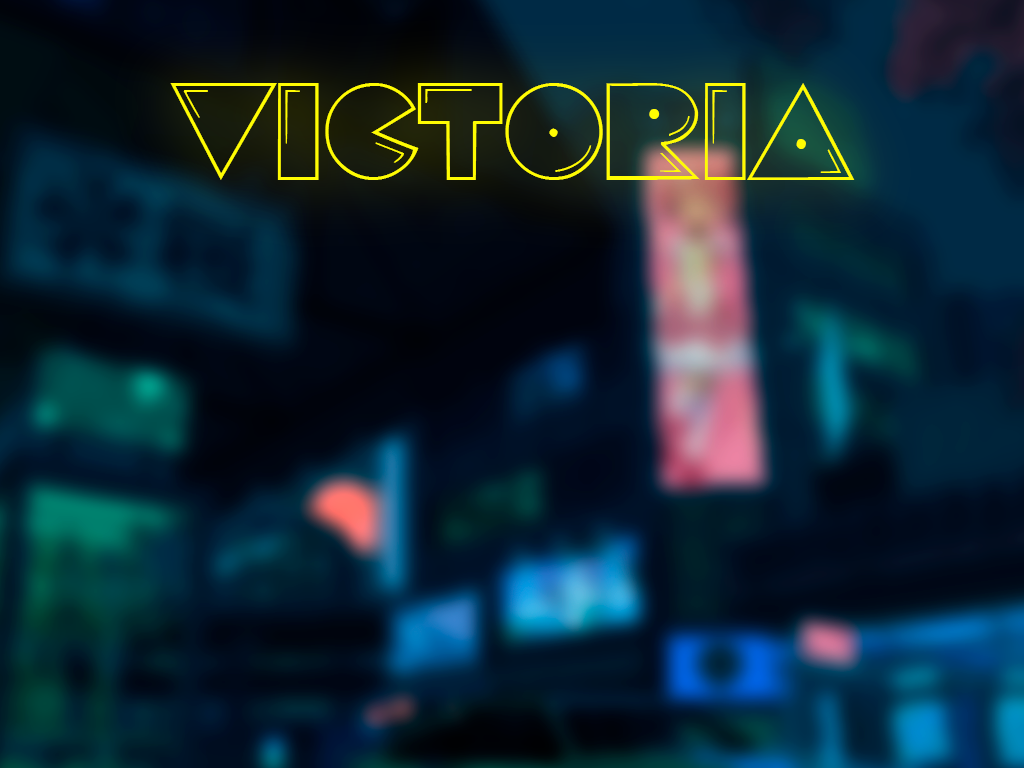
<style>
.page{position:relative;width:1024px;height:768px}
.page>*{position:absolute;margin:0}
.t1{font:98.8px "PacFont";color:#fffc02}
</style>
<div class="page">
<p class="t1" style="left:170px;top:83px;width:685px;height:97px">VICTORIA</p>
</div>
